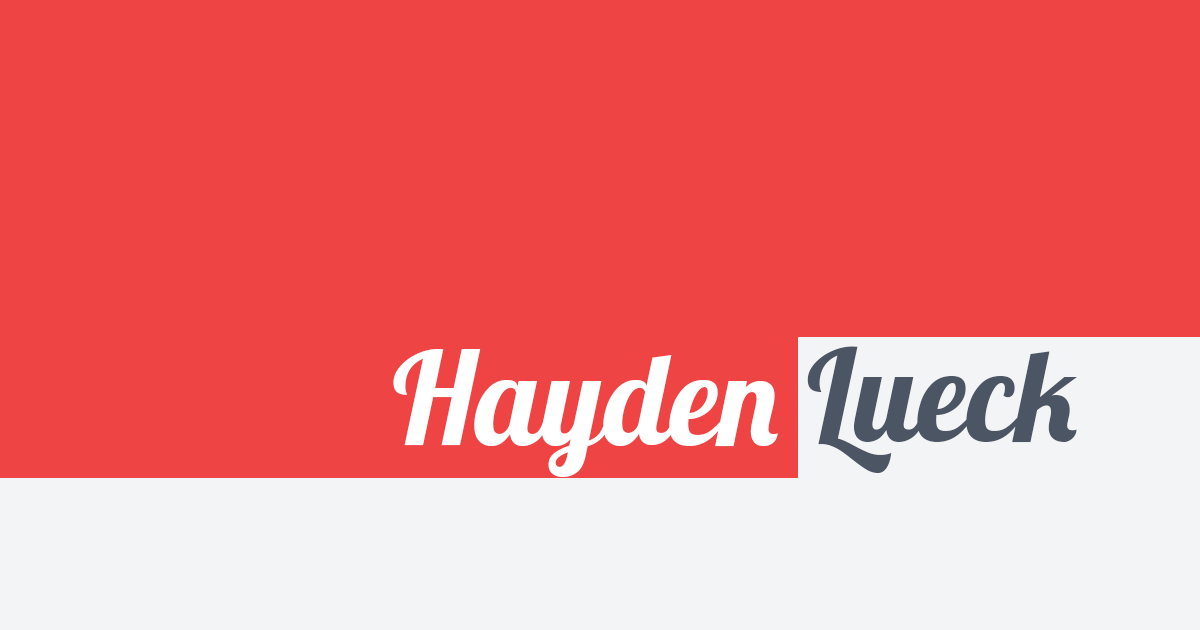
<style>
.page{position:relative;width:1200px;height:630px;background:#ef4444}
.page>*{position:absolute;margin:0}
.t1{font:127px "Lobster-Regular";color:#ffffff}
.t2{font:127px "Lobster-Regular";color:#4b5563}
</style>
<div class="page">
<p class="t1" style="left:393px;top:349px;width:385px;height:128px">Hayden</p>
<p class="t2" style="left:807px;top:346px;width:270px;height:127px">Lueck</p>
</div>
